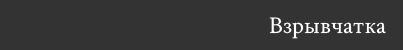
<style>
.page{position:relative;width:403px;height:50px;background:#333333}
.page>*{position:absolute;margin:0}
.t1{font:24px "CrimsonText-Regular";color:#ffffff}
</style>
<div class="page">
<p class="t1" style="left:269px;top:17px;width:117px;height:22px">Взрывчатка</p>
</div>
